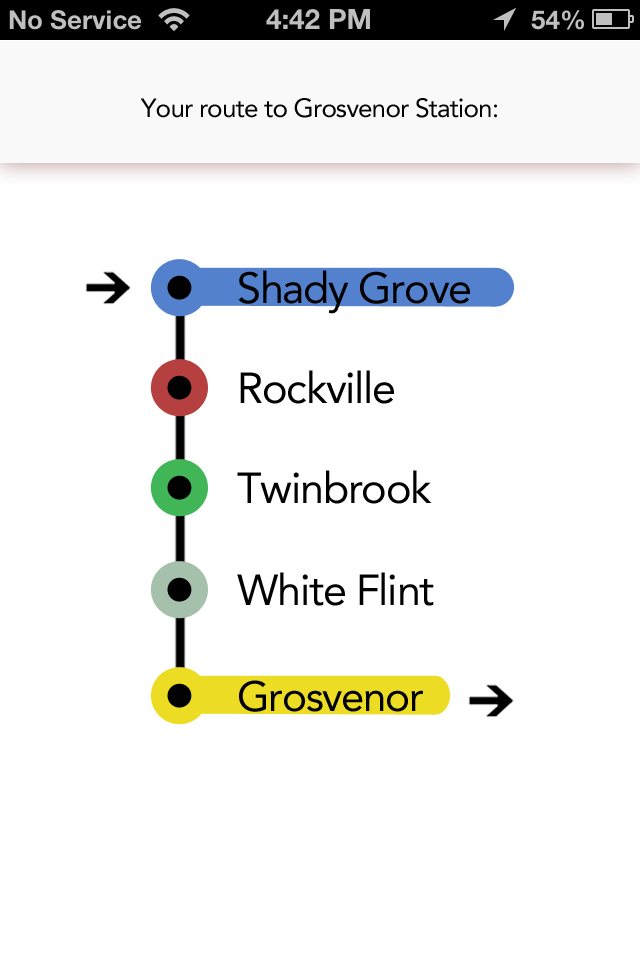
<style>
.page{position:relative;width:640px;height:960px;background:#ffffff}
.page>*{position:absolute;margin:0}
.t1{font:26px "Avenir-Roman";letter-spacing:-0.03em;color:#000000}
.t2{font:43px "Avenir-Roman";letter-spacing:-0.03em;color:#000000}
.t3{font:42px "Avenir-Roman";letter-spacing:-0.03em;color:#000000}
</style>
<div class="page">
<p class="t1" style="left:140px;top:98px;width:357px;height:20px">Your route to Grosvenor Station:</p>
<p class="t2" style="left:238px;top:270px;width:232px;height:44px">Shady Grove</p>
<p class="t2" style="left:240px;top:370px;width:154px;height:34px">Rockville</p>
<p class="t2" style="left:237px;top:470px;width:195px;height:34px">Twinbrook</p>
<p class="t2" style="left:237px;top:572px;width:197px;height:34px">White Flint</p>
<p class="t3" style="left:239px;top:680px;width:184px;height:32px">Grosvenor</p>
</div>
